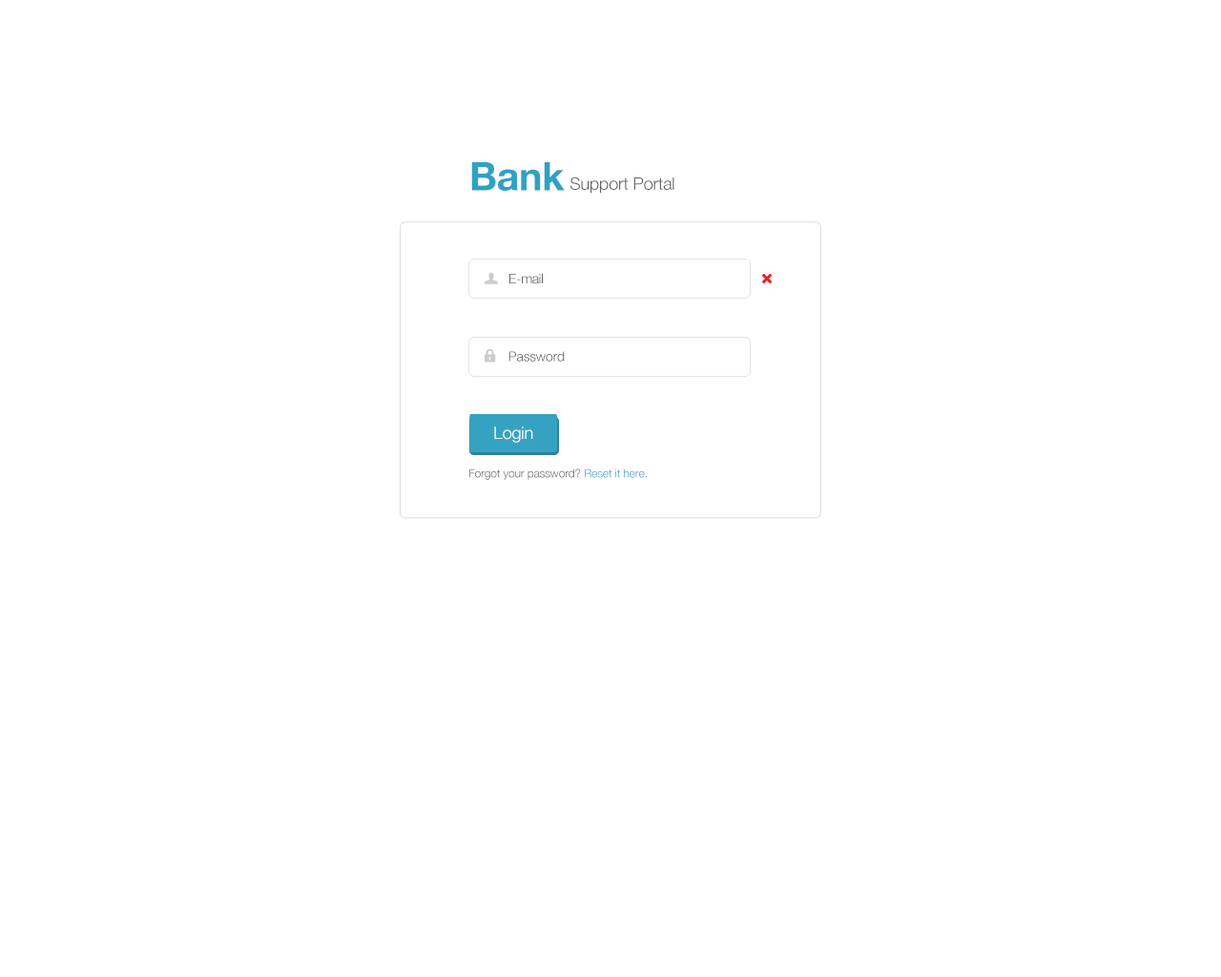
<style>
.page{position:relative;width:1221px;height:977px;background:#ffffff}
.page>*{position:absolute;margin:0}
.t1{font:39.4px "HelveticaNeue-Bold";letter-spacing:-0.01em;color:#2fa2c3}
.t2{font:17.2px "HelveticaNeue-Light";letter-spacing:-0.01em;color:#666666}
.t3{font:13.4px "HelveticaNeue-Light";letter-spacing:-0.01em;color:#666666}
.t4{font:17.2px "HelveticaNeue-Light";letter-spacing:-0.01em;color:#ffffff}
.t5{font:11.4px "HelveticaNeue-Light";letter-spacing:-0.01em;color:#666666}
.t6{font:11.4px "HelveticaNeue-Light";letter-spacing:-0.01em;color:#36a2c1}
</style>
<div class="page">
<p class="t1" style="left:471px;top:162px;width:94px;height:29px">Bank</p>
<p class="t2" style="left:570px;top:176px;width:104px;height:18px">Support Portal</p>
<p class="t3" style="left:509px;top:274px;width:34px;height:10px">E-mail</p>
<p class="t3" style="left:508px;top:351px;width:57px;height:10px">Password</p>
<p class="t4" style="left:494px;top:426px;width:39px;height:17px">Login</p>
<p class="t5" style="left:469px;top:468px;width:178px;height:12px">Forgot your password? <span class="t6">Reset it here.</span></p>
</div>
